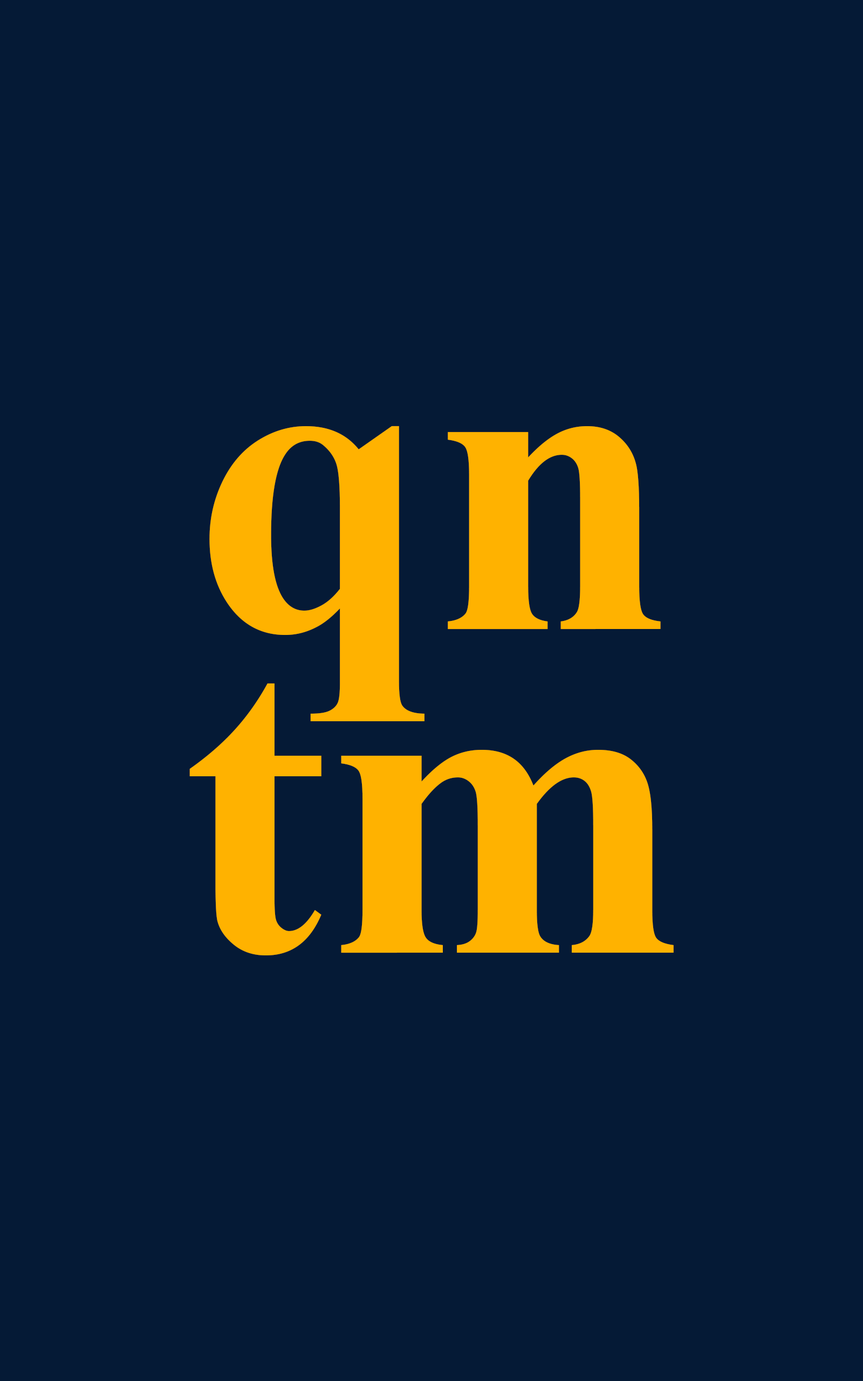
<style>
.page{position:relative;width:863px;height:1381px;background:#051a36}
.page>*{position:absolute;margin:0}
.t1{font:431.6px/323.7px "TimesNewRomanPS-BoldMT";color:#ffb200}
</style>
<div class="page">
<p class="t1" style="left:189px;top:426px;width:485px;height:530px;text-align:center">qn<br>tm</p>
</div>
